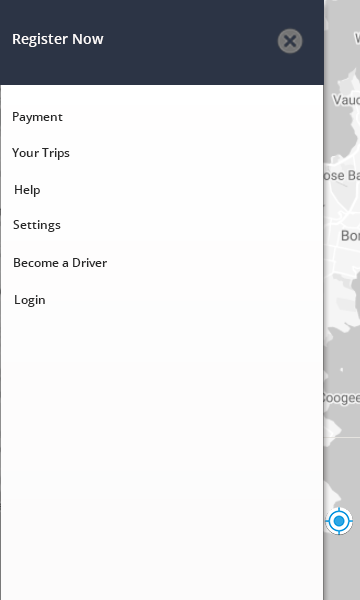
<style>
.page{position:relative;width:360px;height:600px}
.page>*{position:absolute;margin:0}
.t1{font:14px "OpenSans-Semibold";color:#fefbfb}
.t2{font:12px "OpenSans-Semibold";color:#282828}
</style>
<div class="page">
<p class="t1" style="left:13px;top:33px;width:91px;height:14px">Register Now</p>
<p class="t2" style="left:13px;top:112px;width:50px;height:12px">Payment</p>
<p class="t2" style="left:12px;top:148px;width:58px;height:12px">Your Trips</p>
<p class="t2" style="left:15px;top:185px;width:25px;height:12px">Help</p>
<p class="t2" style="left:13px;top:220px;width:48px;height:12px">Settings</p>
<p class="t2" style="left:14px;top:258px;width:93px;height:9px">Become a Driver</p>
<p class="t2" style="left:15px;top:295px;width:30px;height:12px">Login</p>
</div>
